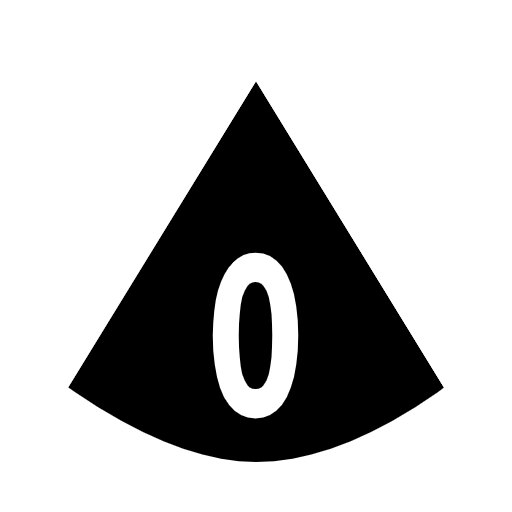
<style>
.page{position:relative;width:512px;height:512px;background:#ffffff}
.page>*{position:absolute;margin:0}
.t1{font:229.3px "Ubuntu-Bold";color:#ffffff;scale:0.74 1}
</style>
<div class="page">
<p class="t1" style="left:212px;top:252px;width:87px;height:167px">0</p>
</div>
